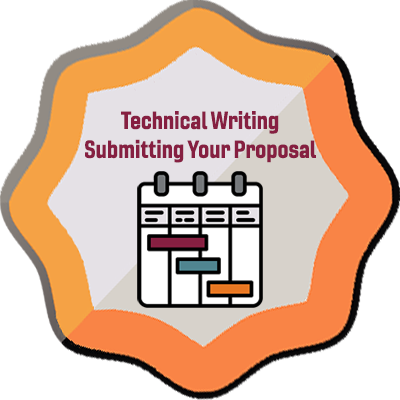
<style>
.page{position:relative;width:400px;height:400px;background:#ffffff}
.page>*{position:absolute;margin:0}
.t1{font:24px "Gineso-ConBol";color:#861f41}
</style>
<div class="page">
<p class="t1" style="left:85px;top:111px;width:231px;height:52px;text-align:center">Technical Writing<br>Submitting Your Proposal</p>
</div>
